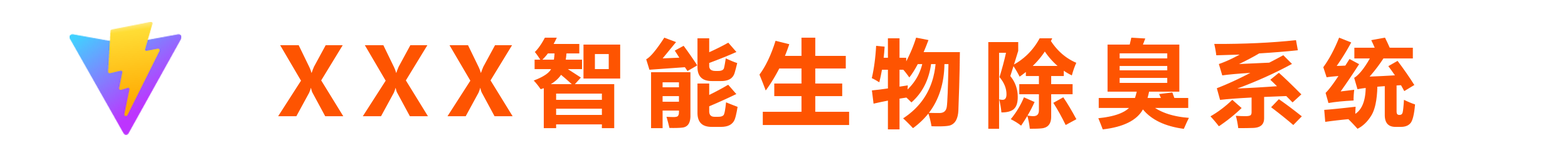
<style>
.page{position:relative;width:1568px;height:157px;background:#ffffff}
.page>*{position:absolute;margin:0}
.t1{font:94.1px "MicrosoftYaHei-Bold";letter-spacing:0.2em;color:#fe5401}
</style>
<div class="page">
<p class="t1" style="left:278px;top:38px;width:1138px;height:91px">XXX智能生物除臭系统</p>
</div>
